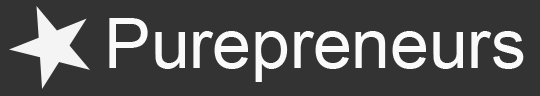
<style>
.page{position:relative;width:540px;height:96px;background:#333333}
.page>*{position:absolute;margin:0}
.t1{font:69.5px "ArialMT";color:#fafafa}
</style>
<div class="page">
<p class="t1" style="left:109px;top:18px;width:415px;height:64px">Purepreneurs</p>
</div>
